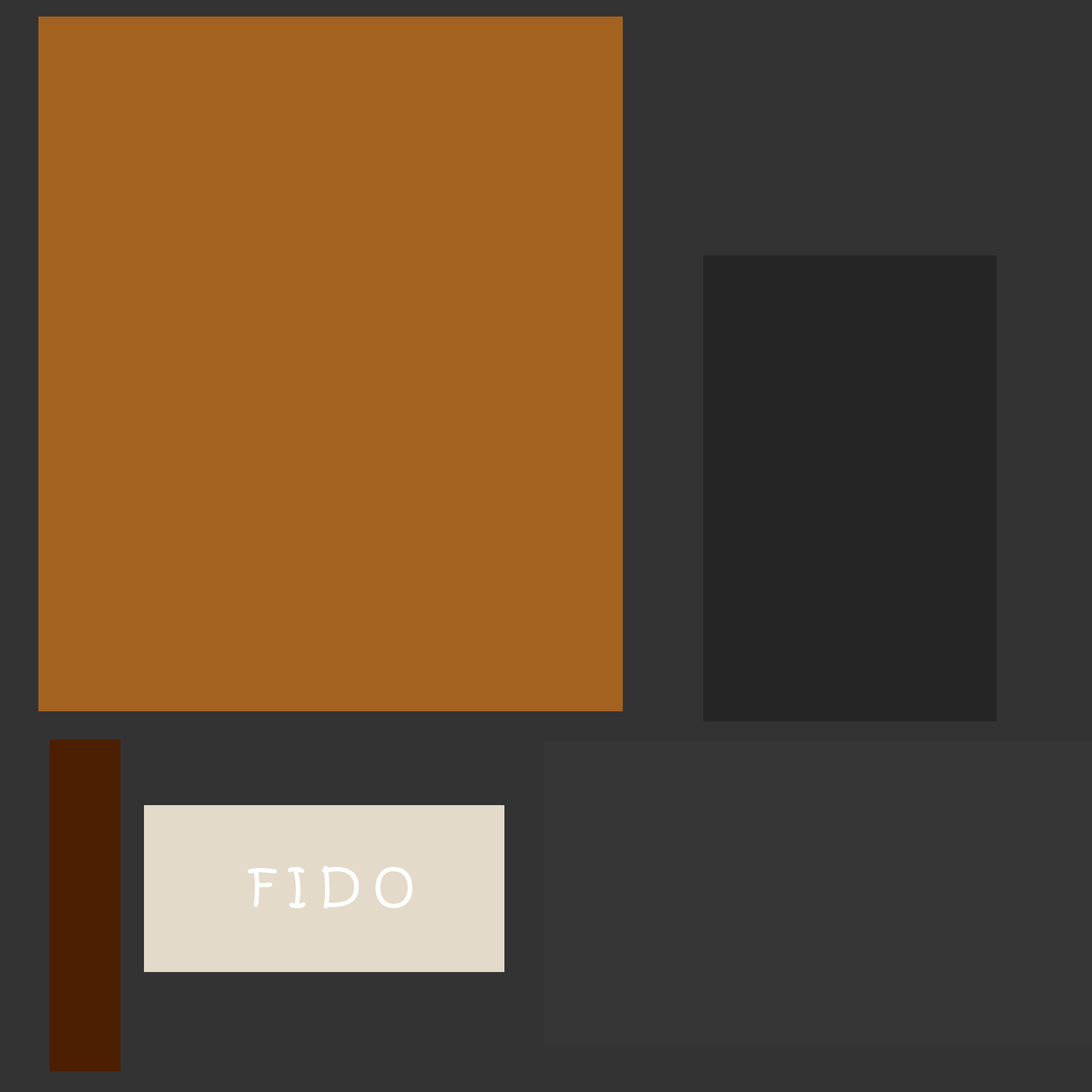
<style>
.page{position:relative;width:1092px;height:1092px;background:#a36220}
.page>*{position:absolute;margin:0}
.t1{font:45.3px "KristenITC-Regular";letter-spacing:0.3em;color:#ffffff}
</style>
<div class="page">
<p class="t1" style="left:247px;top:866px;width:166px;height:43px">FIDO</p>
</div>
